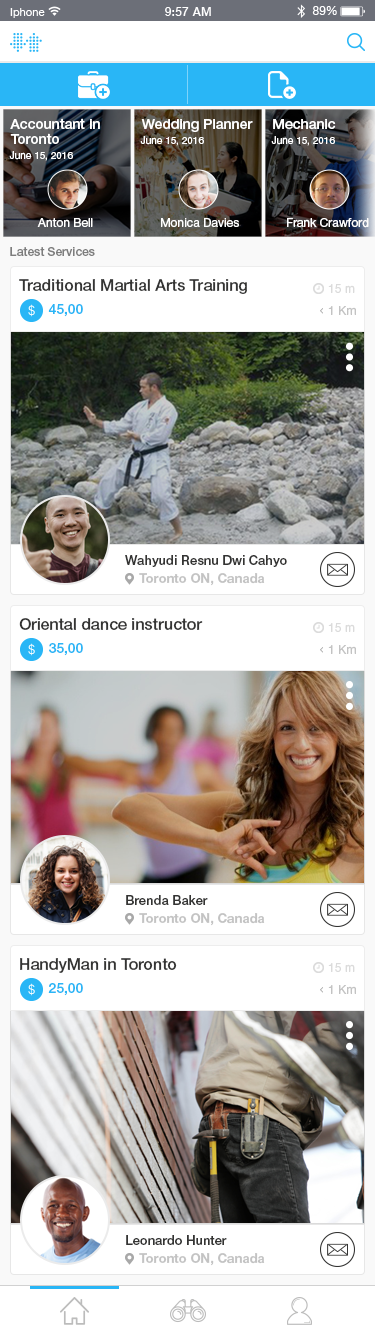
<style>
.page{position:relative;width:375px;height:1336px;background:#ffffff}
.page>*{position:absolute;margin:0}
.t1{font:14px/15px "HelveticaNeueCyr-Medium";color:#ffffff}
.t2{font:14px "HelveticaNeueCyr-Medium";color:#ffffff}
.t3{font:10px "HelveticaNeueCyr-Roman";color:#ffffff}
.t4{font:12px "HelveticaNeueCyr-Roman";color:#ffffff}
.t5{font:12px "HelveticaNeueCyr-Medium";color:#7d7d7d}
.t6{font:16px "HelveticaNeueCyr-Medium";color:#343433}
.t7{font:12px "HelveticaNeueCyr-Roman";color:#dbdbdb}
.t8{font:14px "HelveticaNeueCyr-Medium";color:#29b6f6}
.t9{font:12px "HelveticaNeueCyr-Roman";color:#c3c3c3}
.t10{font:13px "HelveticaNeueCyr-Medium";color:#343433}
.t11{font:13px "HelveticaNeueCyr-Bold";color:#c3c3c3}
</style>
<div class="page">
<p class="t1" style="left:10px;top:118px;width:90px;height:26px">Accountant in <br>Toronto</p>
<p class="t2" style="left:141px;top:119px;width:112px;height:13px">Wedding Planner</p>
<p class="t2" style="left:273px;top:119px;width:63px;height:10px">Mechanic</p>
<p class="t3" style="left:140px;top:136px;width:64px;height:10px">June 15, 2016</p>
<p class="t3" style="left:271px;top:136px;width:64px;height:10px">June 15, 2016</p>
<p class="t3" style="left:9px;top:151px;width:64px;height:10px">June 15, 2016</p>
<p class="t4" style="left:37px;top:218px;width:56px;height:9px">Anton Bell</p>
<p class="t4" style="left:161px;top:218px;width:78px;height:9px">Monica Davies</p>
<p class="t4" style="left:287px;top:218px;width:82px;height:10px">Frank Crawford</p>
<p class="t5" style="left:10px;top:247px;width:85px;height:9px">Latest Services</p>
<p class="t6" style="left:19px;top:279px;width:228px;height:15px">Traditional Martial Arts Training</p>
<p class="t7" style="left:328px;top:284px;width:27px;height:9px">15 m</p>
<p class="t8" style="left:48px;top:304px;width:35px;height:13px">45,00</p>
<p class="t9" style="left:328px;top:306px;width:28px;height:9px">1 Km</p>
<p class="t10" style="left:125px;top:555px;width:162px;height:12px">Wahyudi Resnu Dwi Cahyo</p>
<p class="t11" style="left:139px;top:573px;width:126px;height:13px">Toronto ON, Canada</p>
<p class="t6" style="left:19px;top:618px;width:184px;height:12px">Oriental dance instructor</p>
<p class="t7" style="left:328px;top:623px;width:27px;height:9px">15 m</p>
<p class="t8" style="left:49px;top:643px;width:34px;height:13px">35,00</p>
<p class="t9" style="left:328px;top:645px;width:28px;height:9px">1 Km</p>
<p class="t10" style="left:126px;top:895px;width:82px;height:10px">Brenda Baker</p>
<p class="t11" style="left:139px;top:913px;width:126px;height:13px">Toronto ON, Canada</p>
<p class="t6" style="left:20px;top:958px;width:157px;height:15px">HandyMan in Toronto</p>
<p class="t7" style="left:328px;top:963px;width:27px;height:9px">15 m</p>
<p class="t8" style="left:48px;top:983px;width:35px;height:13px">25,00</p>
<p class="t9" style="left:328px;top:985px;width:28px;height:9px">1 Km</p>
<p class="t10" style="left:126px;top:1235px;width:101px;height:10px">Leonardo Hunter</p>
<p class="t11" style="left:139px;top:1253px;width:126px;height:13px">Toronto ON, Canada</p>
</div>
